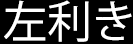
<style>
.page{position:relative;width:133px;height:44px;background:#000000}
.page>*{position:absolute;margin:0}
.t1{font:44px "KozGoPr6N-Regular";color:#ffffff}
</style>
<div class="page">
<p class="t1" style="left:4px;top:0px;width:128px;height:42px">左利き</p>
</div>
